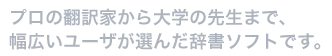
<style>
.page{position:relative;width:332px;height:56px;background:#ffffff}
.page>*{position:absolute;margin:0}
.t1{font:18px/24px "HiraKakuPro-W6";color:#adb4bd}
</style>
<div class="page">
<p class="t1" style="left:9px;top:8px;width:312px;height:42px">プロの翻訳家から大学の先生まで、<br>幅広いユーザが選んだ辞書ソフトです。</p>
</div>
